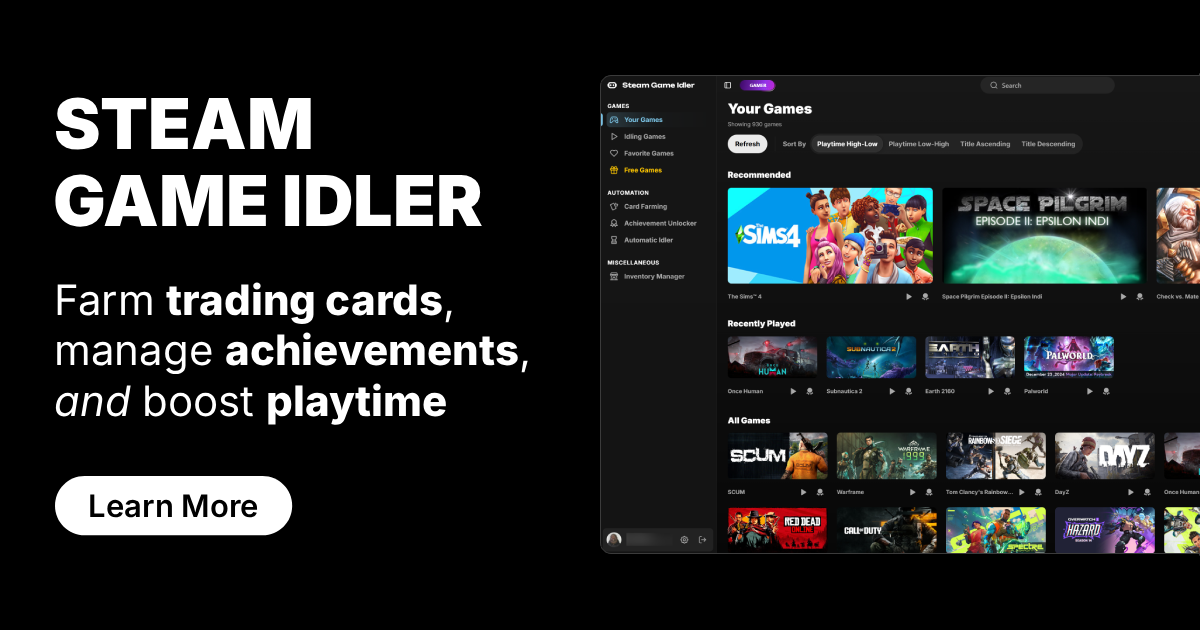
<style>
.page{position:relative;width:1200px;height:630px;background:#000000}
.page>*{position:absolute;margin:0}
.t1{font:70px "Inter-Black";color:#ffffff}
.t2{font:42px "Inter-ExtraBold";color:#ffffff}
.t3{font:42px "Inter-Regular";color:#ffffff}
.t4{font:42px "Inter-Italic";color:#ffffff}
.t5{font:31px "Inter-SemiBold";color:#000000}
</style>
<div class="page">
<p class="t1" style="left:55px;top:97px;width:256px;height:53px">STEAM</p>
<p class="t1" style="left:55px;top:174px;width:427px;height:53px">GAME IDLER</p>
<p class="t2" style="left:55px;top:282px;width:473px;height:143px"><span class="t3">Farm </span>trading cards<span class="t3">,<br>manage </span>achievements<span class="t3">,<br></span><span class="t4">and </span><span class="t3">boost </span>playtime</p>
<p class="t5" style="left:90px;top:494px;width:168px;height:24px">Learn More</p>
</div>
